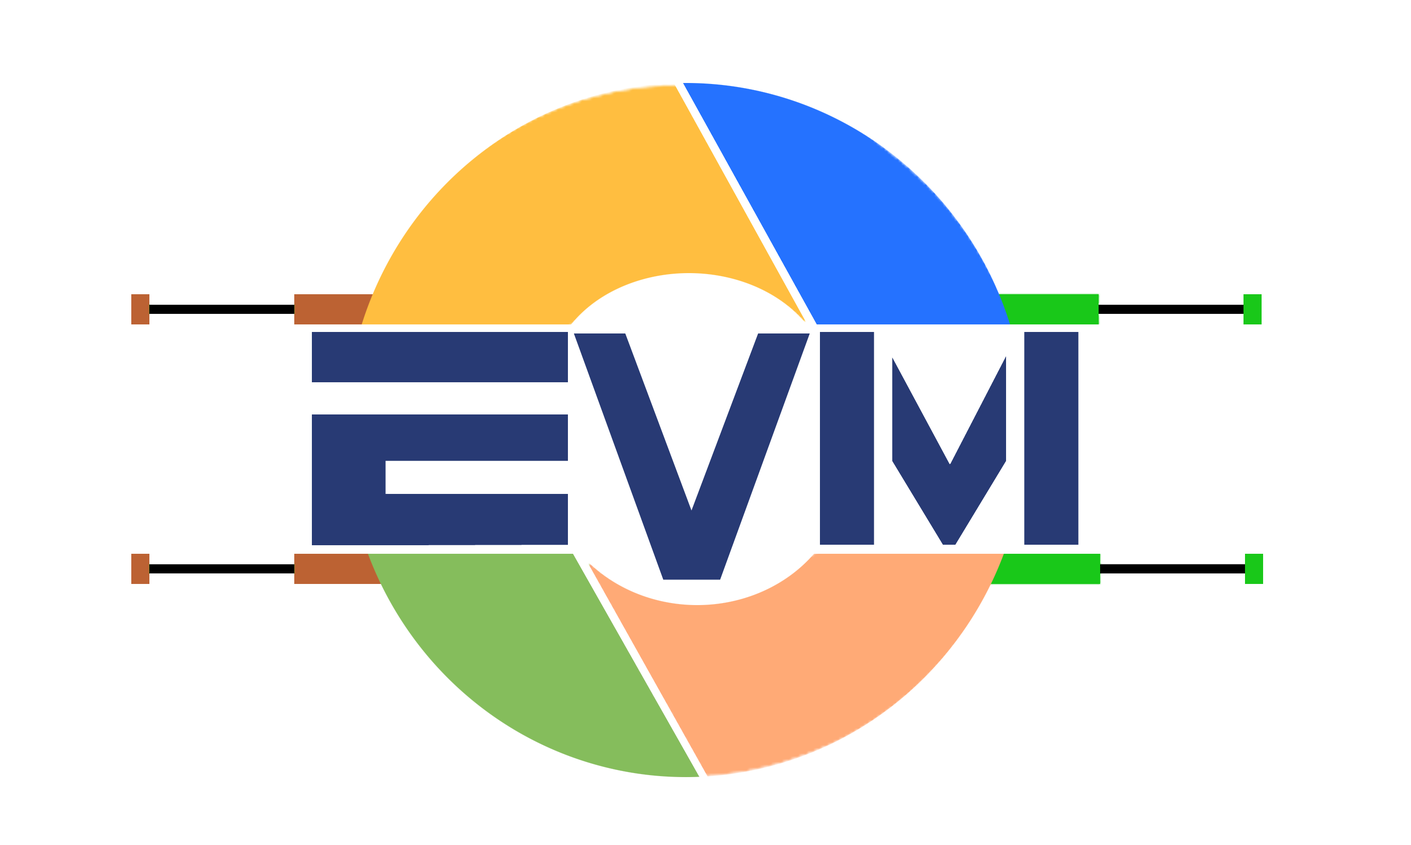
<style>
.page{position:relative;width:1411px;height:845px;background:#ffffff}
.page>*{position:absolute;margin:0}
.t1{font:285.1px "7th-Service";letter-spacing:0.1em;color:#283a74;scale:1.08 1}
.t2{font:329.5px "7th-Service";letter-spacing:0.1em;color:#283a74;scale:0.64 1}
.t3{font:285.1px "7th-Service";letter-spacing:0.1em;color:#283a74;scale:0.82 1}
</style>
<div class="page">
<p class="t1" style="left:312px;top:332px;width:256px;height:213px">E</p>
<p class="t2" style="left:574px;top:334px;width:236px;height:246px">v</p>
<p class="t3" style="left:820px;top:332px;width:259px;height:213px">m</p>
</div>
